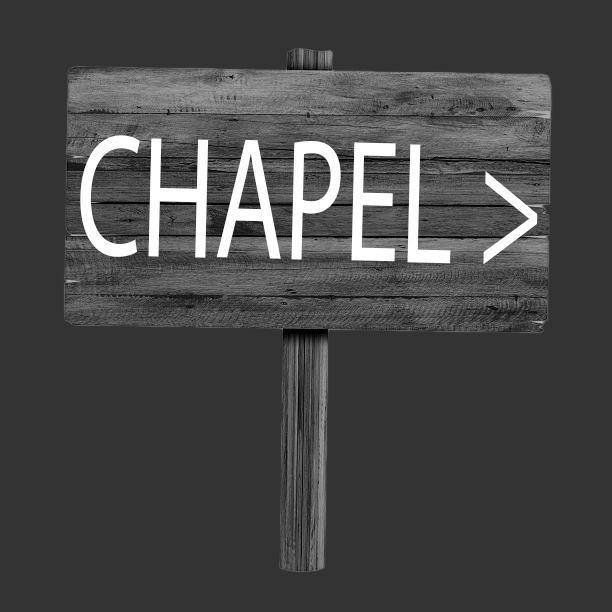
<style>
.page{position:relative;width:612px;height:612px;background:#333333}
.page>*{position:absolute;margin:0}
.t1{font:174.7px "MyriadPro-Regular";color:#ffffff;scale:0.65 1}
</style>
<div class="page">
<p class="t1" style="left:80px;top:135px;width:458px;height:130px;rotate:1deg">CHAPEL &gt;</p>
</div>
